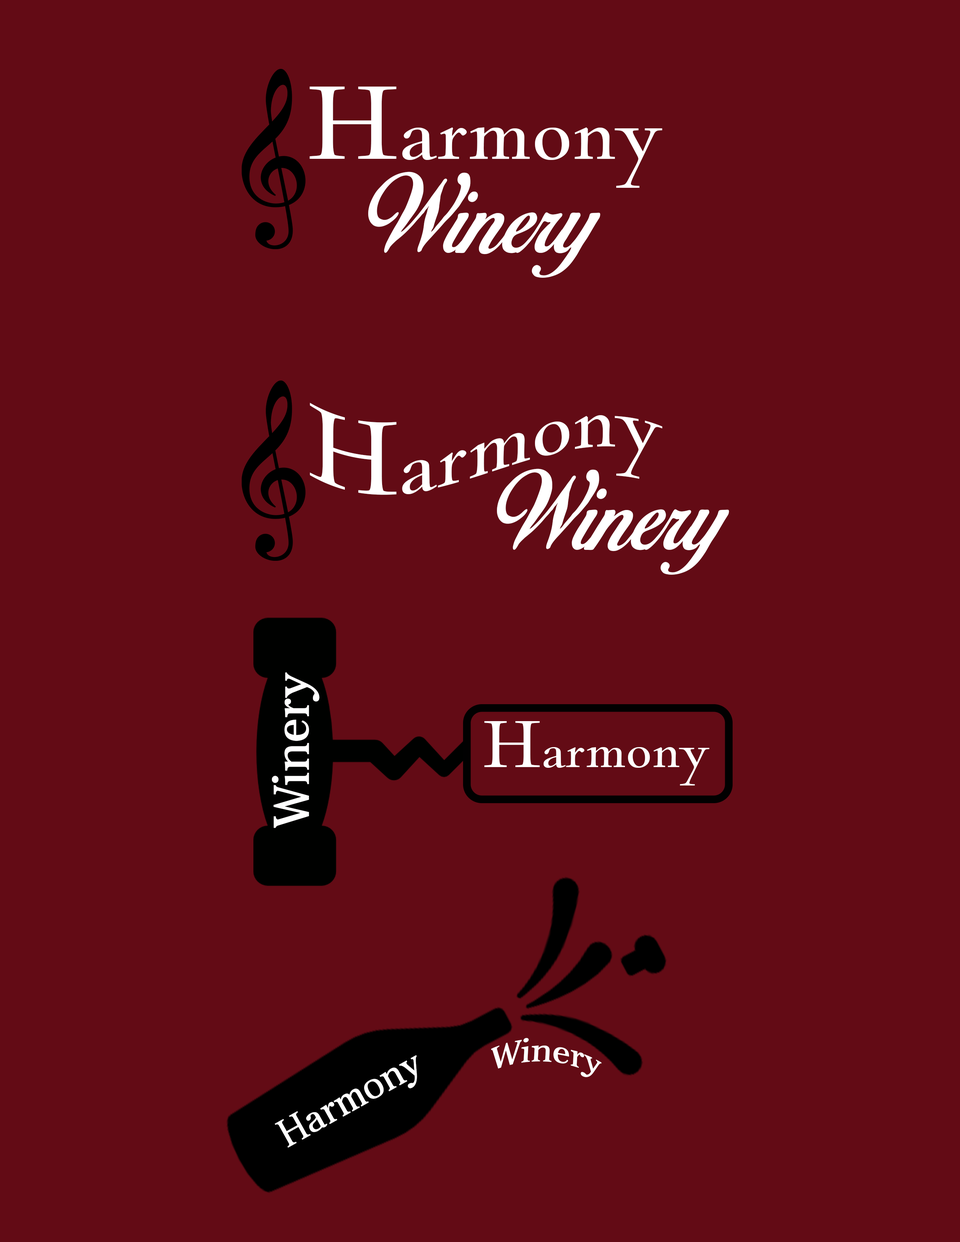
<style>
.page{position:relative;width:960px;height:1242px;background:#630b15}
.page>*{position:absolute;margin:0}
.t1{font:108.2px/61.2px "NicolasCocT-Regu";color:#ffffff}
.t2{font:97.2px/94.1px "BirdsofParadise";color:#ffffff}
.t3{font:108.2px "NicolasCocT-Regu";color:#ffffff}
.t4{font:97.2px "BirdsofParadise";color:#ffffff}
.t5{font:50.8px "Aver";color:#ffffff}
.t6{font:69px "NicolasCocT-Regu";color:#ffffff}
.t7{font:33.2px "Aver";color:#ffffff}
.t8{font:39.5px "Aver";color:#ffffff}
</style>
<div class="page">
<p class="t1" style="left:309px;top:87px;width:353px;height:191px;text-align:center">Harmony <span class="t2">Winery</span></p>
<p class="t3" style="left:310px;top:403px;width:353px;height:92px">Harmony</p>
<p class="t4" style="left:497px;top:469px;width:232px;height:106px">Winery</p>
<p class="t5" style="left:272px;top:672px;width:48px;height:156px;rotate:-90deg">Winery</p>
<p class="t6" style="left:484px;top:721px;width:226px;height:65px">Harmony</p>
<p class="t7" style="left:491px;top:1038px;width:111px;height:39px;rotate:3deg">Winery</p>
<p class="t8" style="left:274px;top:1055px;width:143px;height:93px;rotate:-29deg">Harmony</p>
</div>
